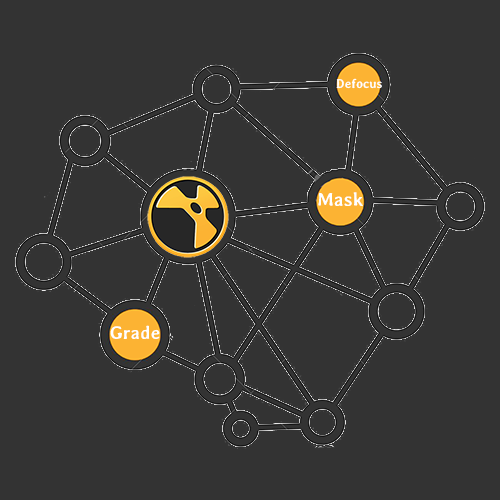
<style>
.page{position:relative;width:500px;height:500px;background:#333333}
.page>*{position:absolute;margin:0}
.t1{font:12.7px "Averia-Bold";color:#ffffff}
.t2{font:19.2px "Averia-Bold";color:#ffffff}
.t3{font:18.5px "Averia-Bold";color:#ffffff}
</style>
<div class="page">
<p class="t1" style="left:336px;top:78px;width:46px;height:11px">Defocus</p>
<p class="t2" style="left:318px;top:192px;width:45px;height:14px">Mask</p>
<p class="t3" style="left:110px;top:325px;width:50px;height:14px">Grade</p>
</div>
